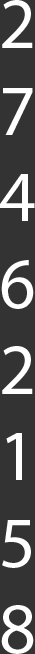
<style>
.page{position:relative;width:35px;height:654px;background:#333333}
.page>*{position:absolute;margin:0}
.t1{font:72px "MyriadPro-Regular";color:#ffffff;text-transform:uppercase}
</style>
<div class="page">
<p class="t1" style="left:0px;top:0px;width:35px;height:654px;text-align:center">2<br>7<br>4<br>6<br>2<br>1<br>5<br>8</p>
</div>
